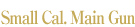
<style>
.page{position:relative;width:135px;height:27px;background:#ffffff}
.page>*{position:absolute;margin:0}
.t1{font:18px "RyuminPro-ExBold";letter-spacing:-0.08em;color:#c4a956;scale:0.88 1}
</style>
<div class="page">
<p class="t1" style="left:1px;top:10px;width:134px;height:15px">Small Cal. Main Gun</p>
</div>
